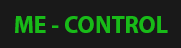
<style>
.page{position:relative;width:181px;height:48px;background:#191919}
.page>*{position:absolute;margin:0}
.t1{font:24px "MyriadPro-Bold";color:#18bb18}
</style>
<div class="page">
<p class="t1" style="left:15px;top:16px;width:153px;height:17px">ME - CONTROL</p>
</div>
